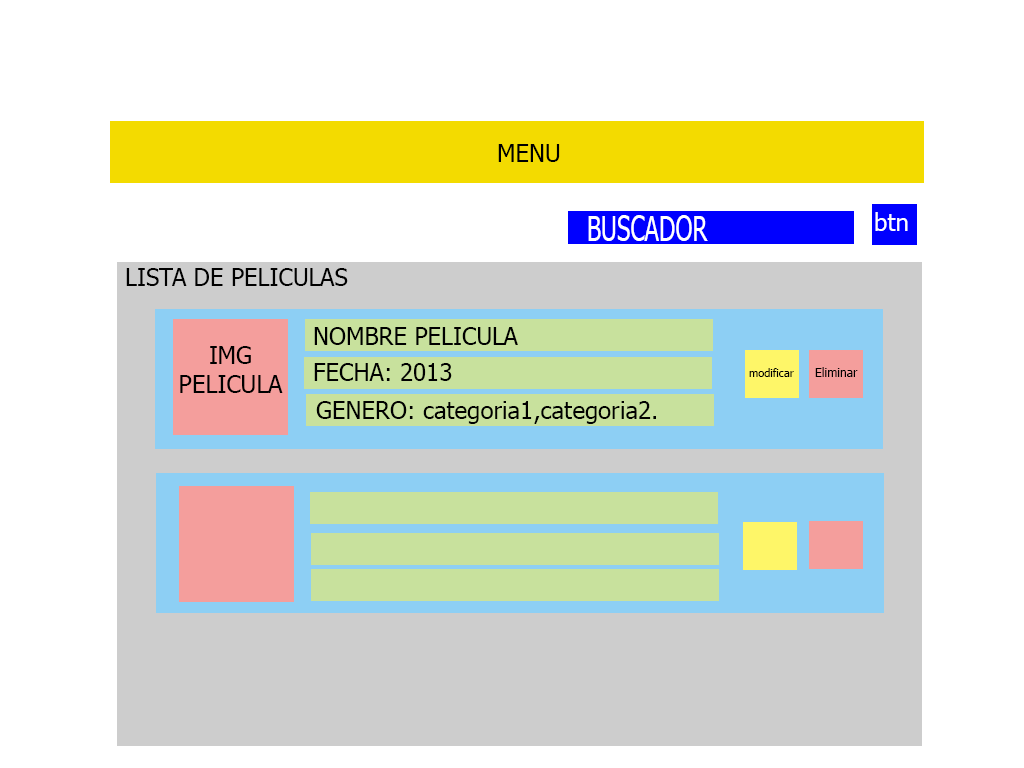
<style>
.page{position:relative;width:1024px;height:768px;background:#ffffff}
.page>*{position:absolute;margin:0}
.t1{font:24px "Tahoma";color:#000000}
.t2{font:34.9px "Tahoma";color:#fefefe;scale:0.69 1}
.t3{font:24px "Tahoma";color:#ffffff}
.t4{font:11px "Tahoma";color:#000000}
.t5{font:12px "Tahoma";color:#000000}
</style>
<div class="page">
<p class="t1" style="left:498px;top:144px;width:62px;height:18px">MENU</p>
<p class="t2" style="left:588px;top:215px;width:120px;height:26px">BUSCADOR</p>
<p class="t3" style="left:875px;top:212px;width:33px;height:19px">btn</p>
<p class="t1" style="left:126px;top:268px;width:222px;height:18px">LISTA DE PELICULAS</p>
<p class="t1" style="left:314px;top:327px;width:204px;height:18px">NOMBRE PELICULA</p>
<p class="t1" style="left:180px;top:346px;width:103px;height:47px;text-align:center">IMG PELICULA</p>
<p class="t1" style="left:314px;top:363px;width:138px;height:18px">FECHA: 2013</p>
<p class="t4" style="left:749px;top:368px;width:45px;height:9px">modificar</p>
<p class="t5" style="left:815px;top:367px;width:43px;height:10px">Eliminar</p>
<p class="t1" style="left:316px;top:401px;width:340px;height:23px">GENERO: categoria1,categoria2.</p>
</div>
